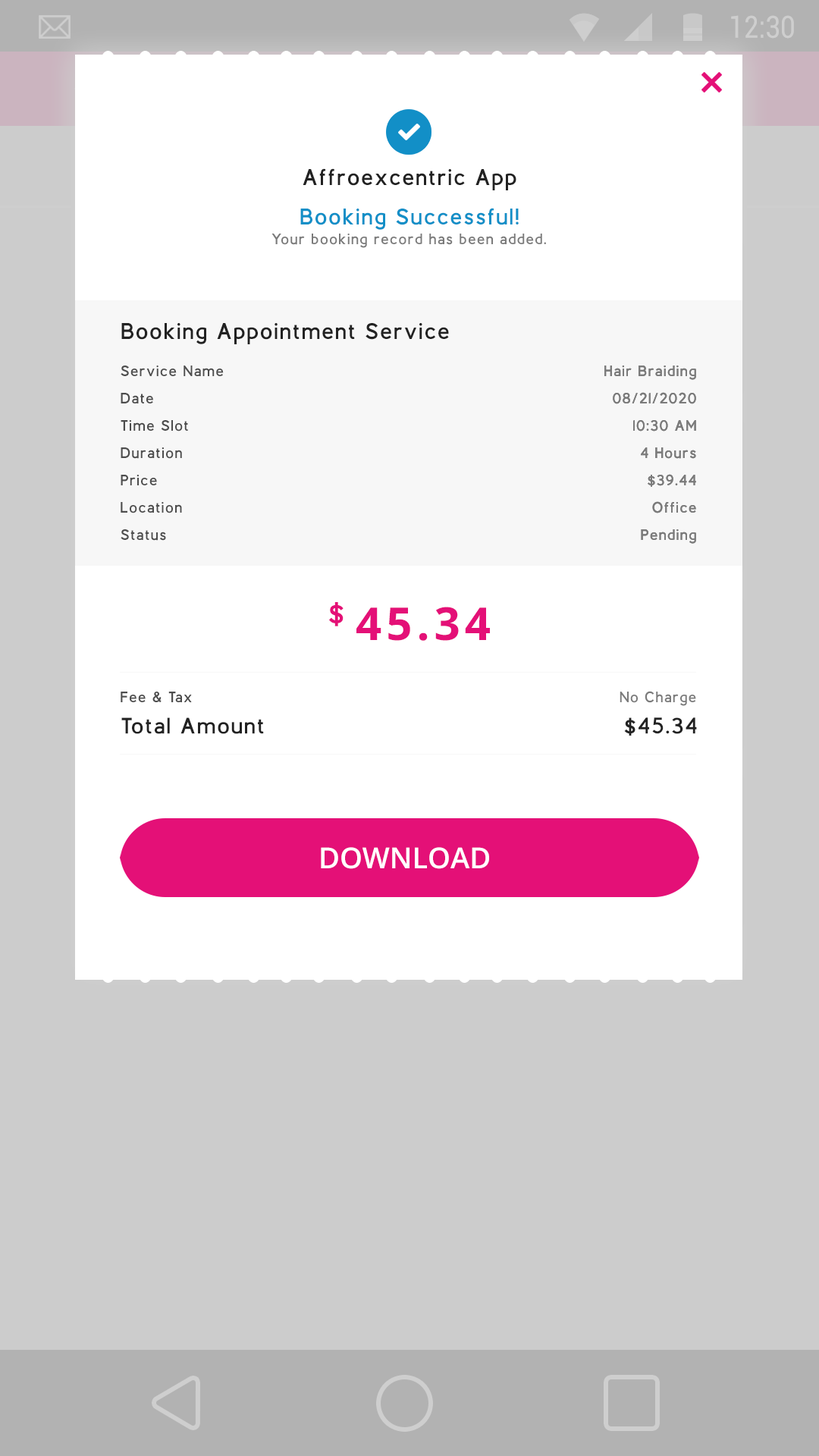
<style>
.page{position:relative;width:819px;height:1456px;background:#cccccc}
.page>*{position:absolute;margin:0}
.t1{font:30.5px "Roboto-Regular";color:#cecece;scale:0.87 1}
.t2{font:22.7px "BerlinBold";letter-spacing:0.1em;color:#222222}
.t3{font:22.7px "BerlinBold";letter-spacing:0.1em;color:#128fc7}
.t4{font:15.2px "BerlinBold";letter-spacing:0.1em;color:#7b7b7b}
.t5{font:15.2px/27.3px "BerlinBold";letter-spacing:0.1em;color:#4d4d4d}
.t6{font:15.2px/27.3px "BerlinBold";letter-spacing:0.1em;color:#7b7b7b}
.t7{font:30.3px "BerlinBold";letter-spacing:0.1em;color:#e41077}
.t8{font:45.5px "OpenSans-Bold";letter-spacing:0.1em;color:#e41077}
.t9{font:15.2px "BerlinBold";letter-spacing:0.1em;color:#4d4d4d}
.t10{font:22.5px "BerlinBold";letter-spacing:0.1em;color:#222222}
.t11{font:28.8px "OpenSans-Semibold";color:#ffffff}
</style>
<div class="page">
<p class="t1" style="left:731px;top:15px;width:63px;height:24px">12:30</p>
<p class="t2" style="left:303px;top:168px;width:213px;height:22px">Affroexcentric App</p>
<p class="t3" style="left:300px;top:208px;width:219px;height:22px">Booking Successful!</p>
<p class="t4" style="left:271px;top:234px;width:275px;height:14px">Your booking record has been added.</p>
<p class="t2" style="left:121px;top:323px;width:328px;height:21px">Booking Appointment Service</p>
<p class="t5" style="left:121px;top:366px;width:103px;height:175px">Service Name<br>Date<br>Time Slot<br>Duration<br>Price<br>Location<br>Status</p>
<p class="t6" style="left:604px;top:366px;width:92px;height:178px;text-align:right">Hair Braiding<br>08/21/2020<br>10:30 AM<br>4 Hours<br>$39.44<br>Office<br>Pending</p>
<p class="t6" style="left:604px;top:366px;width:92px;height:178px;text-align:right">Hair Braiding<br>08/21/2020<br>10:30 AM<br>4 Hours<br>$39.44<br>Office<br>Pending</p>
<p class="t7" style="left:328px;top:602px;width:16px;height:24px">$</p>
<p class="t8" style="left:356px;top:607px;width:134px;height:34px">45.34</p>
<p class="t9" style="left:121px;top:692px;width:71px;height:11px">Fee &amp; Tax</p>
<p class="t4" style="left:620px;top:691px;width:76px;height:15px">No Charge</p>
<p class="t10" style="left:121px;top:717px;width:143px;height:17px">Total Amount</p>
<p class="t10" style="left:624px;top:717px;width:73px;height:19px">$45.34</p>
<p class="t11" style="left:321px;top:847px;width:168px;height:22px">DOWNLOAD</p>
</div>
